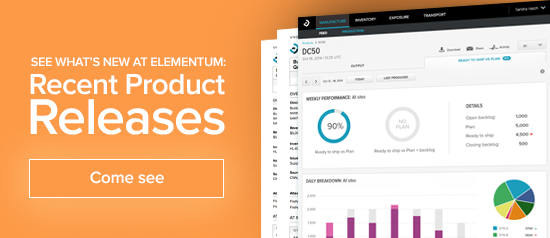
<style>
.page{position:relative;width:550px;height:238px;background:#ffffff}
.page>*{position:absolute;margin:0}
.t1{font:12.7px "ProximaNova-Semibold";letter-spacing:-0.022em;color:#ffffff}
.t2{font:29.9px "ProximaNova-Semibold";letter-spacing:-0.022em;color:#ffffff}
.t3{font:52px "ProximaNova-Semibold";letter-spacing:-0.022em;color:#ffffff}
.t4{font:17px "ProximaNova-Semibold";letter-spacing:-0.012em;color:#ffffff}
</style>
<div class="page">
<p class="t1" style="left:31px;top:57px;width:195px;height:10px">SEE WHAT’S NEW AT ELEMENTUM:</p>
<p class="t2" style="left:30px;top:74px;width:195px;height:21px">Recent Product</p>
<p class="t3" style="left:30px;top:99px;width:195px;height:36px">Releases</p>
<p class="t4" style="left:90px;top:171px;width:74px;height:13px">Come see</p>
</div>
